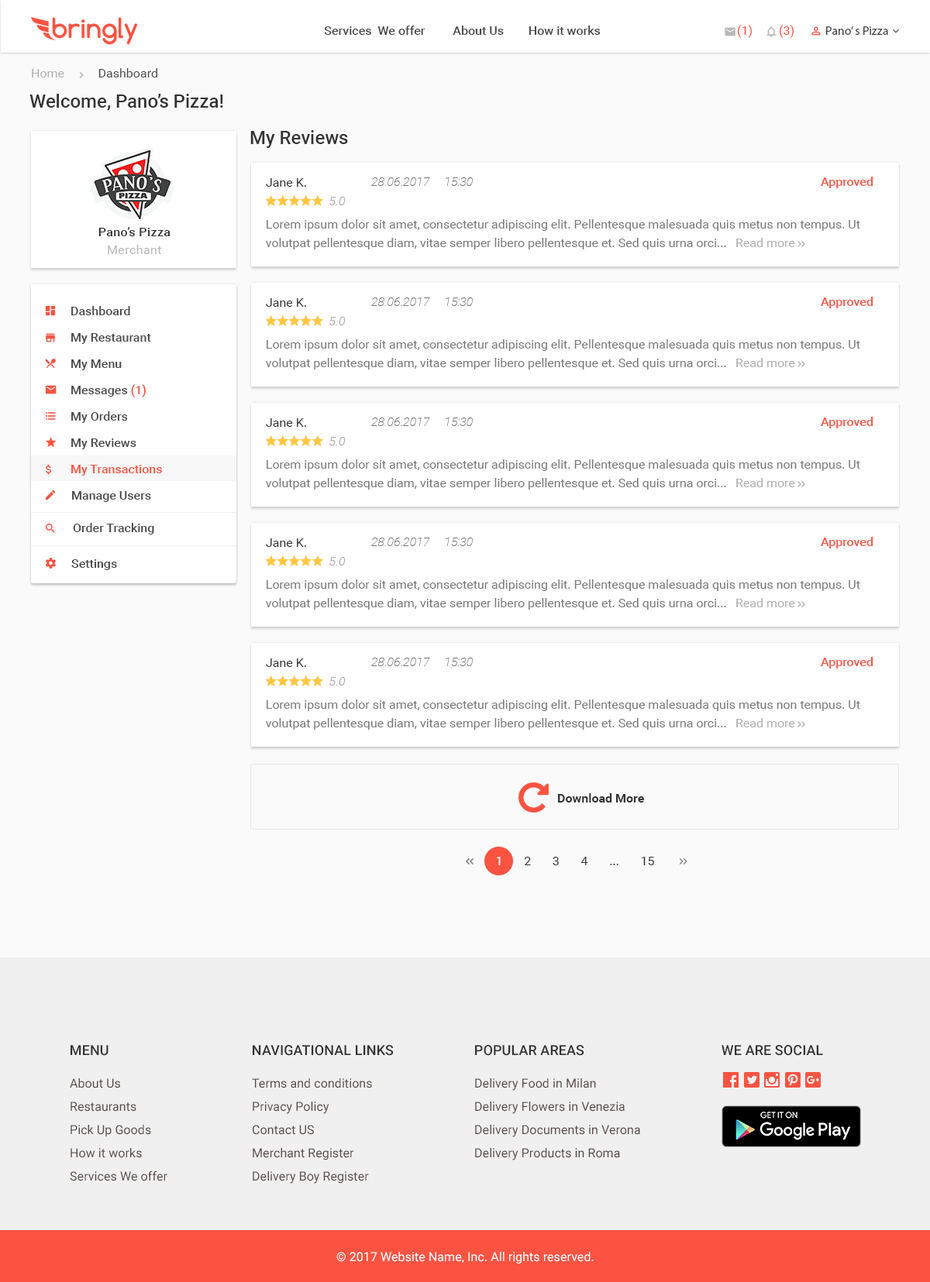
<style>
.page{position:relative;width:930px;height:1282px;background:#ffffff}
.page>*{position:absolute;margin:0}
.t1{font:12.4px "Roboto-Medium";color:#4a4a4a}
.t2{font:12.4px "Roboto-Regular";color:#fa5342}
.t3{font:12.4px "MyriadPro-Regular";color:#4a4a4a}
.t4{font:12.4px "Roboto-Regular";color:#4a4a4a}
.t5{font:12.4px "Roboto-Regular";color:#b0b0b0}
.t6{font:18.6px "Roboto-Medium";color:#333333}
.t7{font:12.4px "Roboto-Regular";color:#333333}
.t8{font:12.4px "Roboto-ThinItalic";color:#777777}
.t9{font:12.4px "Roboto-Medium";color:#fa5342}
.t10{font:12.4px "Roboto-LightItalic";color:#aaaaaa}
.t11{font:12.4px/18.6px "Roboto-Regular";color:#777777}
.t12{font:12.4px "Roboto-Medium";letter-spacing:0.025em;color:#333333}
.t13{font:12.4px "Roboto-Regular";letter-spacing:0.025em;color:#b8b8b8}
.t14{font:12.4px "Roboto-Regular";color:#aeaeae}
.t15{font:12.4px/26.3px "Roboto-Medium";color:#4a4a4a}
.t16{font:12.4px/26.3px "Roboto-Medium";color:#fa5342}
.t17{font:12.4px "Roboto-Bold";color:#333333}
.t18{font:12.4px "Roboto-Regular";color:#ffffff}
.t19{font:13.9px "Roboto-Medium";letter-spacing:0.005em;color:#333333}
.t20{font:13.9px "Roboto-Medium";letter-spacing:0.005em;color:#333333;text-transform:uppercase}
.t21{font:12.4px/23.2px "Roboto-Regular";letter-spacing:0.005em;color:#554c4a}
.t22{font:12.4px "Roboto-Regular";letter-spacing:0.005em;color:#ffffff}
</style>
<div class="page">
<p class="t1" style="left:324px;top:26px;width:277px;height:9px">Services  We offer         About Us        How it works</p>
<p class="t2" style="left:737px;top:25px;width:15px;height:13px">(1)</p>
<p class="t2" style="left:779px;top:25px;width:14px;height:13px">(3)</p>
<p class="t3" style="left:826px;top:26px;width:62px;height:9px">Pano’ s Pizza</p>
<p class="t4" style="left:32px;top:68px;width:125px;height:9px"><span class="t5">Home           </span>Dashboard</p>
<p class="t6" style="left:29px;top:94px;width:194px;height:17px">Welcome, Pano’s Pizza!</p>
<p class="t6" style="left:250px;top:130px;width:98px;height:18px">My Reviews</p>
<p class="t7" style="left:266px;top:178px;width:40px;height:9px">Jane K.</p>
<p class="t8" style="left:371px;top:177px;width:102px;height:9px">28.06.2017     15:30</p>
<p class="t9" style="left:821px;top:177px;width:52px;height:11px">Approved</p>
<p class="t10" style="left:329px;top:197px;width:17px;height:8px">5.0</p>
<p class="t11" style="left:266px;top:219px;width:594px;height:31px">Lorem ipsum dolor sit amet, consectetur adipiscing elit. Pellentesque malesuada quis metus non tempus. Ut volutpat pellentesque diam, vitae semper libero pellentesque et. Sed quis urna orci...</p>
<p class="t12" style="left:98px;top:227px;width:72px;height:9px">Pano’s Pizza</p>
<p class="t13" style="left:108px;top:245px;width:53px;height:9px">Merchant</p>
<p class="t14" style="left:736px;top:238px;width:59px;height:9px">Read more</p>
<p class="t7" style="left:266px;top:298px;width:40px;height:9px">Jane K.</p>
<p class="t8" style="left:371px;top:298px;width:102px;height:8px">28.06.2017     15:30</p>
<p class="t9" style="left:821px;top:297px;width:52px;height:11px">Approved</p>
<p class="t15" style="left:71px;top:306px;width:91px;height:170px">Dashboard<br>My Restaurant<br>My Menu<br>Messages <span class="t16">(1)<br></span>My Orders<br>My Reviews<br><span class="t16">My Transactions</span></p>
<p class="t10" style="left:329px;top:317px;width:17px;height:8px">5.0</p>
<p class="t11" style="left:266px;top:339px;width:594px;height:31px">Lorem ipsum dolor sit amet, consectetur adipiscing elit. Pellentesque malesuada quis metus non tempus. Ut volutpat pellentesque diam, vitae semper libero pellentesque et. Sed quis urna orci...</p>
<p class="t14" style="left:736px;top:358px;width:59px;height:9px">Read more</p>
<p class="t7" style="left:266px;top:418px;width:40px;height:9px">Jane K.</p>
<p class="t8" style="left:371px;top:418px;width:102px;height:8px">28.06.2017     15:30</p>
<p class="t9" style="left:821px;top:417px;width:52px;height:12px">Approved</p>
<p class="t10" style="left:329px;top:437px;width:17px;height:9px">5.0</p>
<p class="t11" style="left:266px;top:459px;width:594px;height:31px">Lorem ipsum dolor sit amet, consectetur adipiscing elit. Pellentesque malesuada quis metus non tempus. Ut volutpat pellentesque diam, vitae semper libero pellentesque et. Sed quis urna orci...</p>
<p class="t14" style="left:736px;top:478px;width:59px;height:9px">Read more</p>
<p class="t1" style="left:72px;top:491px;width:79px;height:11px">Manage Users</p>
<p class="t1" style="left:73px;top:523px;width:81px;height:12px">Order Tracking</p>
<p class="t7" style="left:266px;top:539px;width:40px;height:8px">Jane K.</p>
<p class="t8" style="left:371px;top:538px;width:102px;height:8px">28.06.2017     15:30</p>
<p class="t9" style="left:821px;top:537px;width:52px;height:12px">Approved</p>
<p class="t10" style="left:329px;top:557px;width:17px;height:9px">5.0</p>
<p class="t1" style="left:71px;top:559px;width:46px;height:11px">Settings</p>
<p class="t11" style="left:266px;top:580px;width:594px;height:30px">Lorem ipsum dolor sit amet, consectetur adipiscing elit. Pellentesque malesuada quis metus non tempus. Ut volutpat pellentesque diam, vitae semper libero pellentesque et. Sed quis urna orci...</p>
<p class="t14" style="left:736px;top:598px;width:59px;height:9px">Read more</p>
<p class="t7" style="left:266px;top:659px;width:40px;height:8px">Jane K.</p>
<p class="t8" style="left:371px;top:658px;width:102px;height:8px">28.06.2017     15:30</p>
<p class="t9" style="left:821px;top:657px;width:52px;height:12px">Approved</p>
<p class="t10" style="left:329px;top:677px;width:17px;height:9px">5.0</p>
<p class="t11" style="left:266px;top:700px;width:594px;height:30px">Lorem ipsum dolor sit amet, consectetur adipiscing elit. Pellentesque malesuada quis metus non tempus. Ut volutpat pellentesque diam, vitae semper libero pellentesque et. Sed quis urna orci...</p>
<p class="t14" style="left:736px;top:718px;width:59px;height:10px">Read more</p>
<p class="t17" style="left:558px;top:793px;width:86px;height:10px">Download More</p>
<p class="t7" style="left:496px;top:857px;width:158px;height:9px"><span class="t18">1    </span>   2       3       4       ...       15</p>
<p class="t19" style="left:71px;top:1045px;width:37px;height:11px">MENU</p>
<p class="t20" style="left:253px;top:1045px;width:141px;height:11px">Navigational Links</p>
<p class="t20" style="left:475px;top:1045px;width:109px;height:11px">Popular Areas</p>
<p class="t20" style="left:721px;top:1045px;width:102px;height:11px">We are social</p>
<p class="t21" style="left:70px;top:1079px;width:97px;height:103px">About Us<br>Restaurants<br>Pick Up Goods <br>How it works <br>Services We offer</p>
<p class="t21" style="left:252px;top:1079px;width:120px;height:105px">Terms and conditions<br>Privacy Policy<br>Contact US <br>Merchant Register <br>Delivery Boy Register</p>
<p class="t21" style="left:475px;top:1079px;width:165px;height:82px">Delivery Food in Milan<br>Delivery Flowers in Venezia<br>Delivery Documents in Verona<br>Delivery Products in Roma</p>
<p class="t22" style="left:336px;top:1252px;width:258px;height:13px">© 2017 Website Name, Inc. All rights reserved.</p>
</div>
